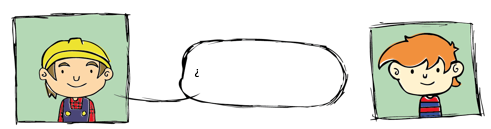
<style>
.page{position:relative;width:491px;height:129px;background:#ffffff}
.page>*{position:absolute;margin:0}
.t1{font:10.7px "MyriadHebrew-Regular";color:#ffffff}
.t2{font:10.7px "MyriadHebrew-Regular";color:#000000}
</style>
<div class="page">
<p class="t1" style="left:194px;top:69px;width:9px;height:8px">¿<span class="t2">¿</span></p>
</div>
